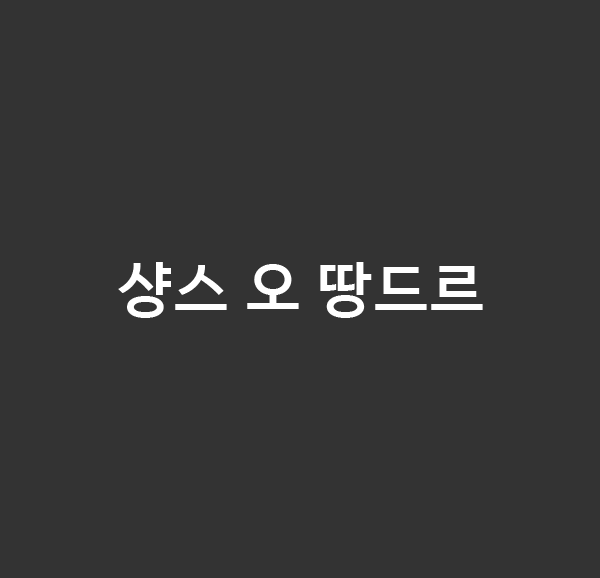
<style>
.page{position:relative;width:600px;height:578px;background:#333333}
.page>*{position:absolute;margin:0}
.t1{font:60px "HancomGothicBold";color:#ffffff}
</style>
<div class="page">
<p class="t1" style="left:118px;top:262px;width:365px;height:56px">샹스 오 땅드르</p>
</div>
